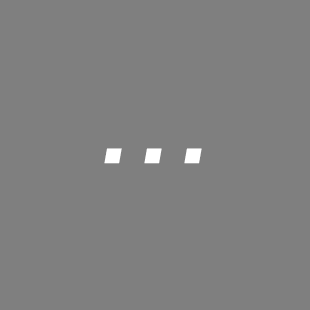
<style>
.page{position:relative;width:310px;height:310px;background:#7f7f7f}
.page>*{position:absolute;margin:0}
.t1{font:143.9px "ArialMT";color:#ffffff;font-style:italic}
</style>
<div class="page">
<p class="t1" style="left:104px;top:148px;width:98px;height:16px">...</p>
</div>
